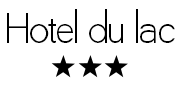
<style>
.page{position:relative;width:180px;height:90px;background:#ffffff}
.page>*{position:absolute;margin:0}
.t1{font:48px "QuaverSans";color:#000000}
</style>
<div class="page">
<p class="t1" style="left:7px;top:9px;width:168px;height:34px">Hotel du lac</p>
</div>
